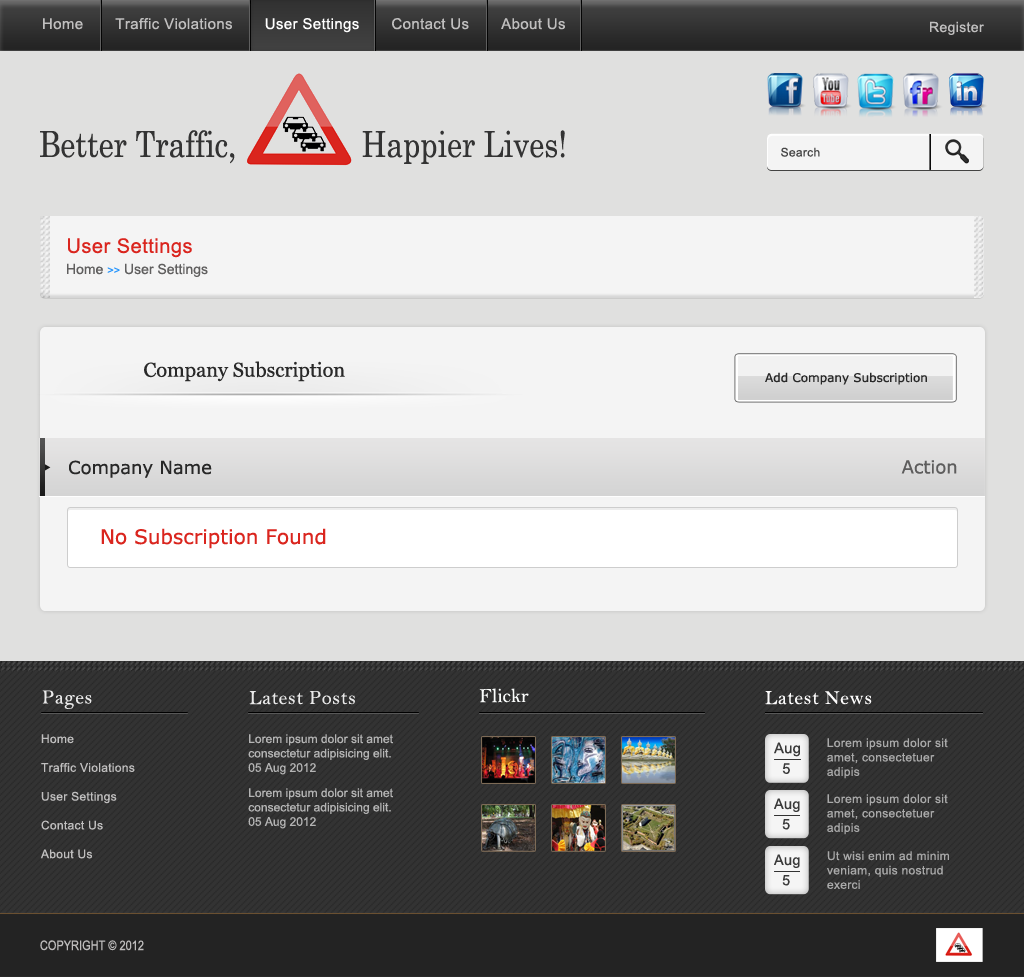
<style>
.page{position:relative;width:1024px;height:977px;background:#e0e0df}
.page>*{position:absolute;margin:0}
.t1{font:15px "ArialMT";letter-spacing:0.025em;color:#c0bfbf}
.t2{font:15px "ArialMT";letter-spacing:0.025em;color:#ffffff}
.t3{font:14px "ArialMT";letter-spacing:0.025em;color:#c0bfbf}
.t4{font:36px "Century";color:#333333;scale:0.83 1}
.t5{font:12px "ArialMT";letter-spacing:0.025em;color:#474747}
.t6{font:20px "ArialMT";letter-spacing:0.025em;color:#da251e}
.t7{font:14px "ArialMT";color:#605f5f}
.t8{font:11px "ArialMT";color:#2695fc}
.t9{font:20px "Georgia";color:#292929}
.t10{font:12px "Verdana";color:#282828}
.t11{font:18px "Verdana";color:#282828}
.t12{font:18px "Verdana";color:#5e5d5d}
.t13{font:20px "Verdana";color:#da251e}
.t14{font:20px "BellMT";color:#fbfdfc}
.t15{font:20px "BellMT";letter-spacing:0.025em;color:#eaeaea}
.t16{font:20px "BellMT";letter-spacing:0.025em;color:#fdfcfc}
.t17{font:12px "ArialMT";letter-spacing:0.025em;color:#c0bfbf}
.t18{font:12px "ArialMT";color:#b4b4b4}
.t19{font:14.6px "ArialMT";letter-spacing:0.025em;color:#3a3a3a}
.t20{font:12px "ArialMT";letter-spacing:0.025em;color:#a9a9a9}
.t21{font:14.4px "ArialMT";letter-spacing:0.025em;color:#3a3a3a}
.t22{font:13.2px "ArialMT";color:#bdbcbc;scale:0.83 1}
</style>
<div class="page">
<p class="t1" style="left:43px;top:18px;width:522px;height:15px">Home       Traffic Violations      <span class="t2"> User Settings       </span>Contact Us       About Us</p>
<p class="t3" style="left:930px;top:21px;width:54px;height:14px">Register</p>
<p class="t4" style="left:40px;top:130px;width:525px;height:34px">Better Traffic,               Happier Lives!</p>
<p class="t5" style="left:781px;top:147px;width:39px;height:10px">Search</p>
<p class="t6" style="left:68px;top:238px;width:124px;height:20px">User Settings</p>
<p class="t7" style="left:67px;top:263px;width:141px;height:14px">Home <span class="t8">&gt;&gt; </span>User Settings</p>
<p class="t9" style="left:144px;top:361px;width:201px;height:21px">Company Subscription</p>
<p class="t10" style="left:765px;top:372px;width:162px;height:13px">Add Company Subscription</p>
<p class="t11" style="left:69px;top:460px;width:143px;height:18px">Company Name</p>
<p class="t12" style="left:901px;top:460px;width:56px;height:14px">Action</p>
<p class="t13" style="left:101px;top:528px;width:225px;height:21px">No Subscription Found</p>
<p class="t14" style="left:479px;top:688px;width:50px;height:15px">Flickr</p>
<p class="t15" style="left:42px;top:690px;width:50px;height:19px">Pages</p>
<p class="t15" style="left:249px;top:691px;width:106px;height:14px">Latest Posts</p>
<p class="t16" style="left:765px;top:691px;width:107px;height:14px">Latest News</p>
<p class="t17" style="left:40px;top:734px;width:95px;height:125px">Home<br>       <br>Traffic Violations<br>      <br>User Settings<br>       <br>Contact Us<br>      <br>About Us</p>
<p class="t18" style="left:248px;top:734px;width:145px;height:41px">Lorem ipsum dolor sit amet <br>consectetur adipisicing elit.<br>05 Aug 2012</p>
<p class="t19" style="left:774px;top:742px;width:26px;height:15px">Aug</p>
<p class="t20" style="left:827px;top:738px;width:121px;height:41px">Lorem ipsum dolor sit <br>amet, consectetuer <br>adipis</p>
<p class="t19" style="left:782px;top:763px;width:8px;height:11px">5</p>
<p class="t18" style="left:248px;top:788px;width:145px;height:41px">Lorem ipsum dolor sit amet <br>consectetur adipisicing elit.<br>05 Aug 2012</p>
<p class="t21" style="left:774px;top:798px;width:26px;height:14px">Aug</p>
<p class="t20" style="left:827px;top:794px;width:121px;height:41px">Lorem ipsum dolor sit <br>amet, consectetuer <br>adipis</p>
<p class="t21" style="left:782px;top:819px;width:8px;height:11px">5</p>
<p class="t21" style="left:774px;top:854px;width:26px;height:14px">Aug</p>
<p class="t20" style="left:827px;top:851px;width:122px;height:38px">Ut wisi enim ad minim <br>veniam, quis nostrud <br>exerci</p>
<p class="t21" style="left:782px;top:875px;width:8px;height:11px">5</p>
<p class="t22" style="left:40px;top:940px;width:104px;height:11px">COPYRIGHT © 2012</p>
</div>
